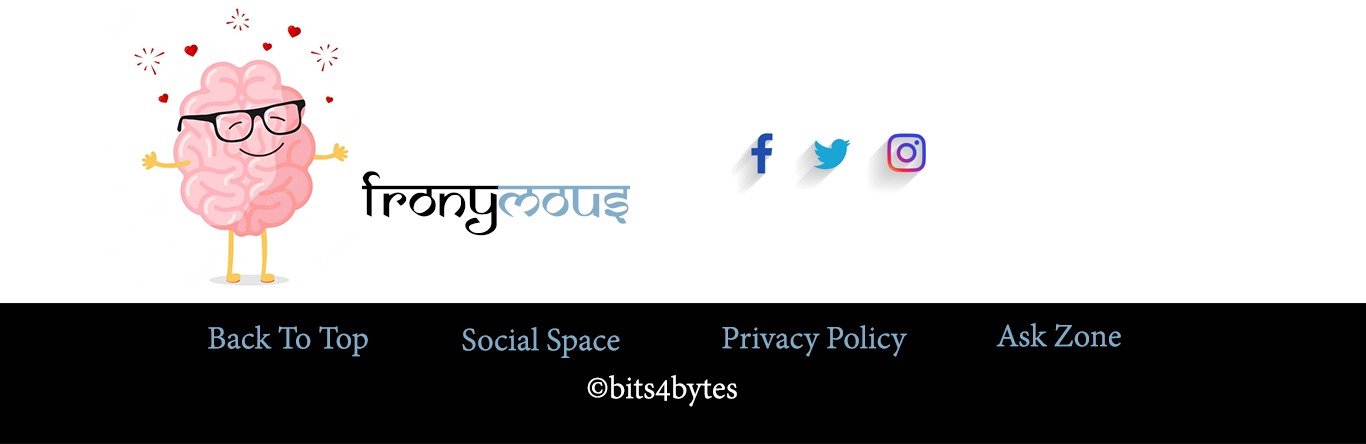
<style>
.page{position:relative;width:1366px;height:444px;background:#ffffff}
.page>*{position:absolute;margin:0}
.t1{font:57.4px "SamarkanNormal";color:#000000}
.t2{font:57.4px "SamarkanNormal";color:#82adc9}
.t3{font:35px "AdobeDevanagari-Regular";color:#82adc9}
.t4{font:35px "AdobeDevanagari-Regular";color:#ffffff}
</style>
<div class="page">
<p class="t1" style="left:362px;top:171px;width:268px;height:65px">frony<span class="t2">mous</span></p>
<p class="t3" style="left:208px;top:325px;width:160px;height:32px">Back To Top</p>
<p class="t3" style="left:462px;top:327px;width:158px;height:31px">Social Space</p>
<p class="t3" style="left:722px;top:325px;width:185px;height:32px">Privacy Policy</p>
<p class="t3" style="left:996px;top:323px;width:125px;height:24px">Ask Zone</p>
<p class="t4" style="left:587px;top:375px;width:150px;height:32px">©bits4bytes</p>
</div>
